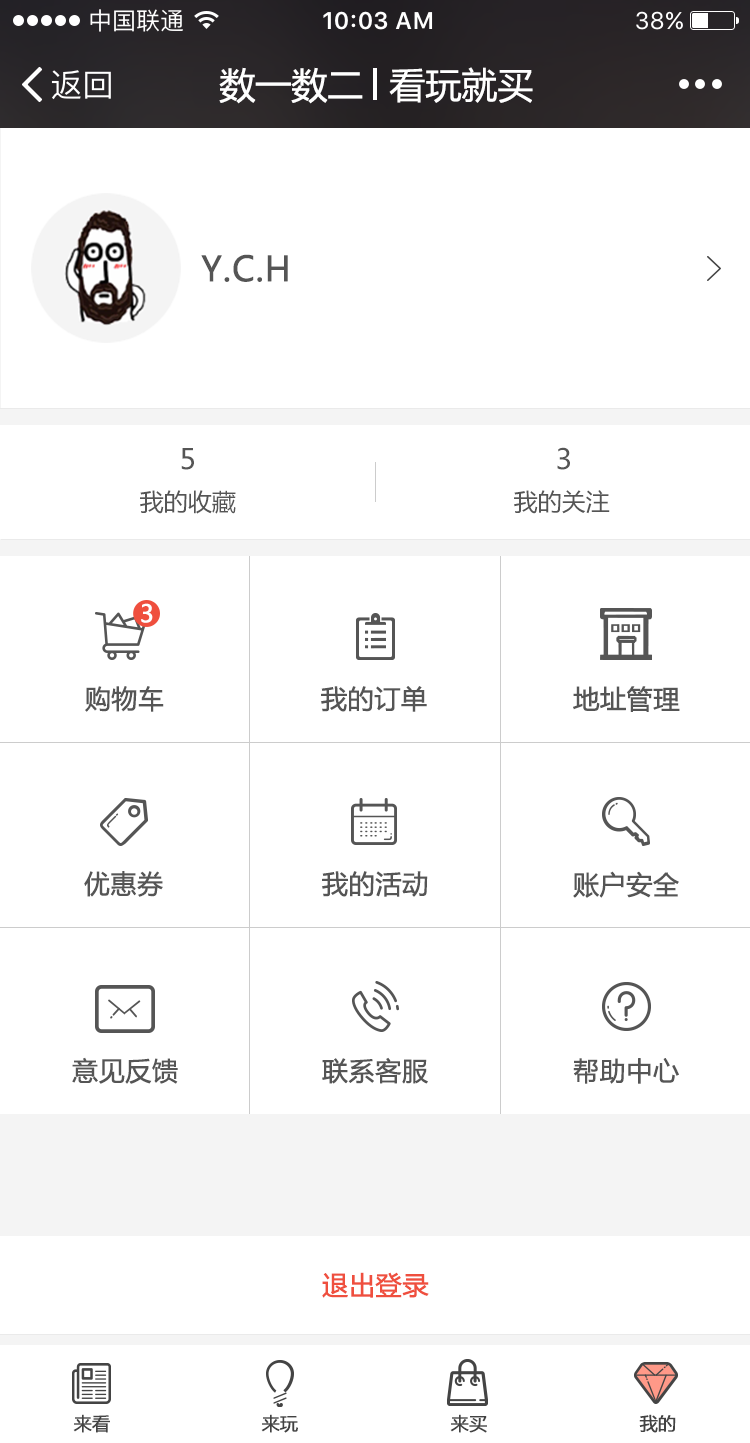
<style>
.page{position:relative;width:750px;height:1443px;background:#ffffff}
.page>*{position:absolute;margin:0}
.t1{font:36px "MicrosoftYaHei";color:#ffffff}
.t2{font:34px "MicrosoftYaHei";color:#555555;font-weight:bold}
.t3{font:28px "MicrosoftYaHei";color:#555555}
.t4{font:24px "MicrosoftYaHei";color:#555555}
.t5{font:24px "MicrosoftYaHei";color:#ffffff;font-weight:bold}
.t6{font:26px "MicrosoftYaHei";color:#555555;font-weight:bold}
.t7{font:25.9px "MicrosoftYaHei";color:#555555;font-weight:bold}
.t8{font:26px "MicrosoftYaHei";color:#ef4f3e;font-weight:bold}
.t9{font:18px "MicrosoftYaHei";color:#444444;font-weight:bold}
.t10{font:18px "MicrosoftYaHei";color:#424242;font-weight:bold}
</style>
<div class="page">
<p class="t1" style="left:219px;top:67px;width:144px;height:37px">数一数二</p>
<p class="t1" style="left:389px;top:67px;width:144px;height:36px">看玩就买</p>
<p class="t2" style="left:201px;top:254px;width:87px;height:28px">Y.C.H</p>
<p class="t3" style="left:181px;top:448px;width:13px;height:22px">5</p>
<p class="t3" style="left:557px;top:447px;width:13px;height:23px">3</p>
<p class="t4" style="left:140px;top:490px;width:96px;height:24px">我的收藏</p>
<p class="t4" style="left:514px;top:490px;width:96px;height:24px">我的关注</p>
<p class="t5" style="left:141px;top:603px;width:12px;height:20px">3</p>
<p class="t6" style="left:85px;top:686px;width:79px;height:26px">购物车</p>
<p class="t7" style="left:321px;top:686px;width:106px;height:26px">我的订单</p>
<p class="t6" style="left:573px;top:686px;width:107px;height:26px">地址管理</p>
<p class="t6" style="left:84px;top:871px;width:79px;height:26px">优惠券</p>
<p class="t6" style="left:322px;top:871px;width:106px;height:26px">我的活动</p>
<p class="t6" style="left:573px;top:871px;width:106px;height:27px">账户安全</p>
<p class="t7" style="left:72px;top:1057px;width:106px;height:27px">意见反馈</p>
<p class="t6" style="left:322px;top:1057px;width:106px;height:27px">联系客服</p>
<p class="t6" style="left:573px;top:1058px;width:106px;height:26px">帮助中心</p>
<p class="t8" style="left:322px;top:1272px;width:107px;height:26px">退出登录</p>
<p class="t9" style="left:73px;top:1414px;width:37px;height:19px">来看</p>
<p class="t10" style="left:261px;top:1414px;width:37px;height:19px">来玩</p>
<p class="t10" style="left:450px;top:1414px;width:37px;height:19px">来买</p>
<p class="t10" style="left:639px;top:1414px;width:37px;height:19px">我的</p>
</div>
